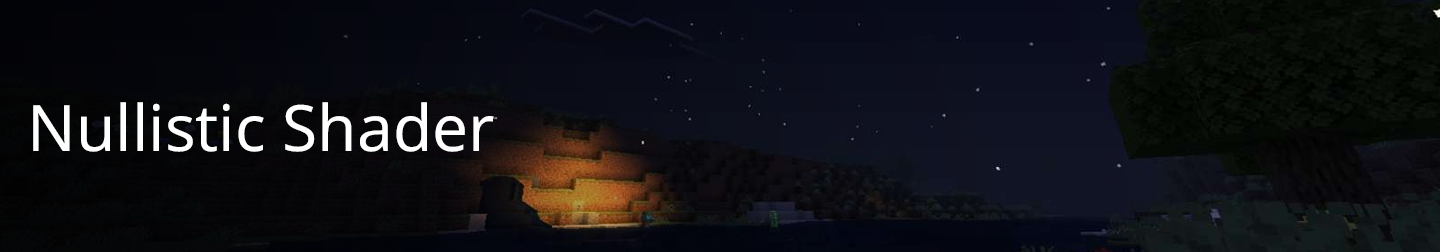
<style>
.page{position:relative;width:1440px;height:252px}
.page>*{position:absolute;margin:0}
.t1{font:64px "NotoSans-Regular";color:#ffffff}
</style>
<div class="page">
<p class="t1" style="left:33px;top:102px;width:461px;height:50px">Nullistic Shader</p>
</div>
